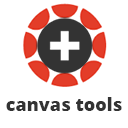
<style>
.page{position:relative;width:128px;height:128px;background:#ffffff}
.page>*{position:absolute;margin:0}
.t1{font:18.1px "OpenSans-Extrabold";color:#333333}
</style>
<div class="page">
<p class="t1" style="left:6px;top:97px;width:116px;height:14px">canvas tools</p>
</div>
